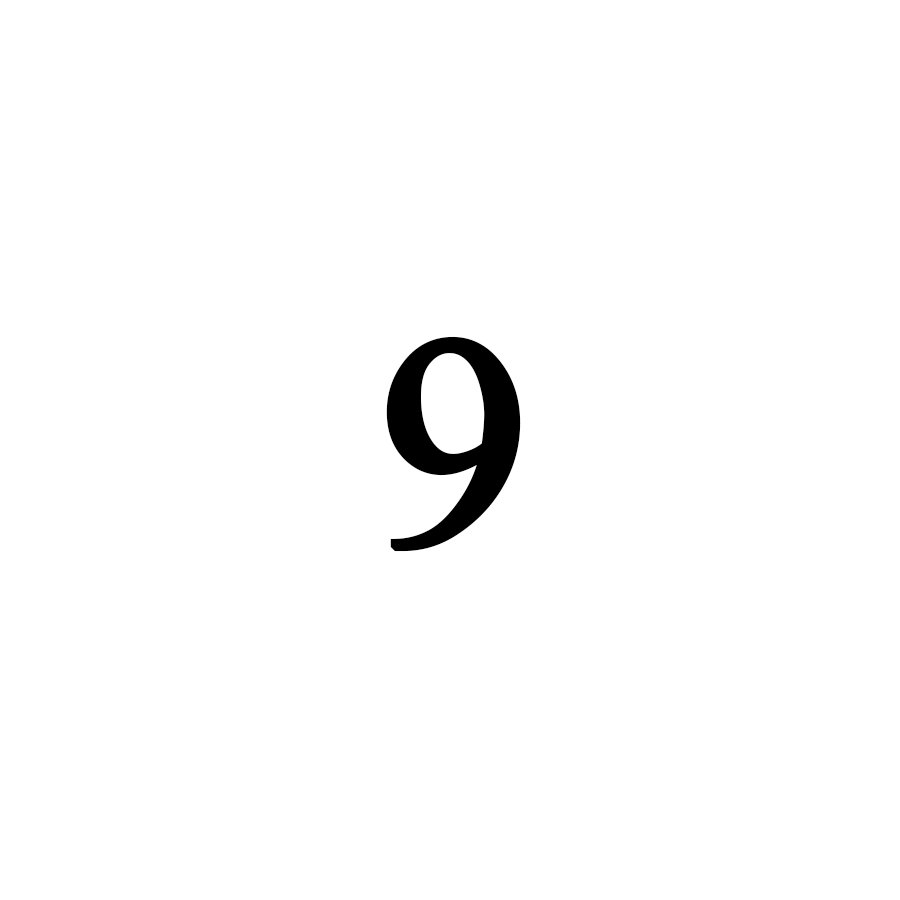
<style>
.page{position:relative;width:900px;height:900px;background:#ffffff}
.page>*{position:absolute;margin:0}
.t1{font:300px "TimesNewRomanPSMT";color:#000000;font-weight:bold}
</style>
<div class="page">
<p class="t1" style="left:386px;top:336px;width:135px;height:216px">9</p>
</div>
